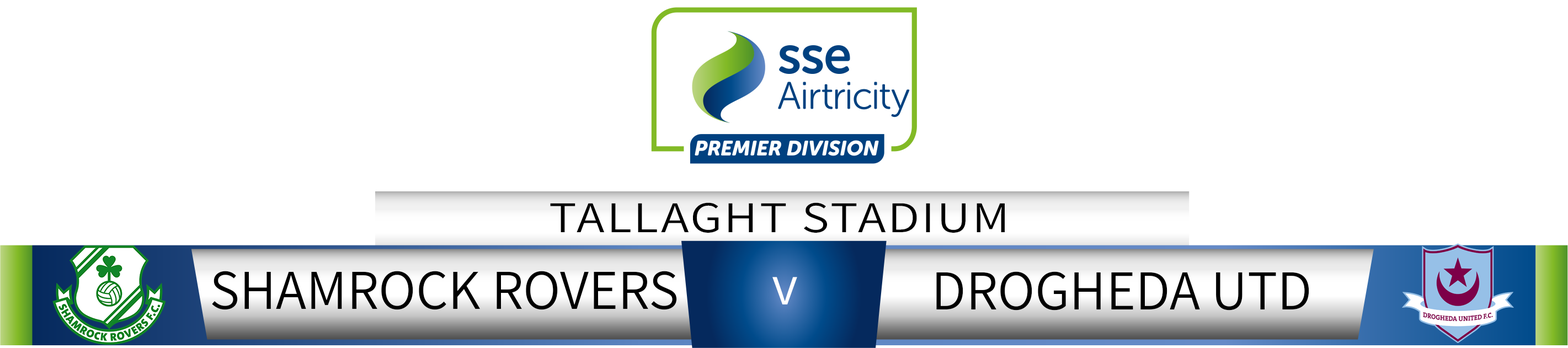
<style>
.page{position:relative;width:1568px;height:348px;background:#ffffff}
.page>*{position:absolute;margin:0}
.t1{font:44px "Assistant-Regular";letter-spacing:0.04em;color:#000000;scale:1.18 1}
.t2{font:56.3px "Assistant-Regular";color:#000000}
.t3{font:56.3px "Assistant-Regular";color:#ffffff}
</style>
<div class="page">
<p class="t1" style="left:550px;top:202px;width:455px;height:31px">TALLAGHT STADIUM</p>
<p class="t2" style="left:212px;top:271px;width:465px;height:39px">SHAMROCK ROVERS</p>
<p class="t3" style="left:772px;top:277px;width:25px;height:28px">v</p>
<p class="t2" style="left:936px;top:271px;width:373px;height:40px">DROGHEDA UTD</p>
</div>
